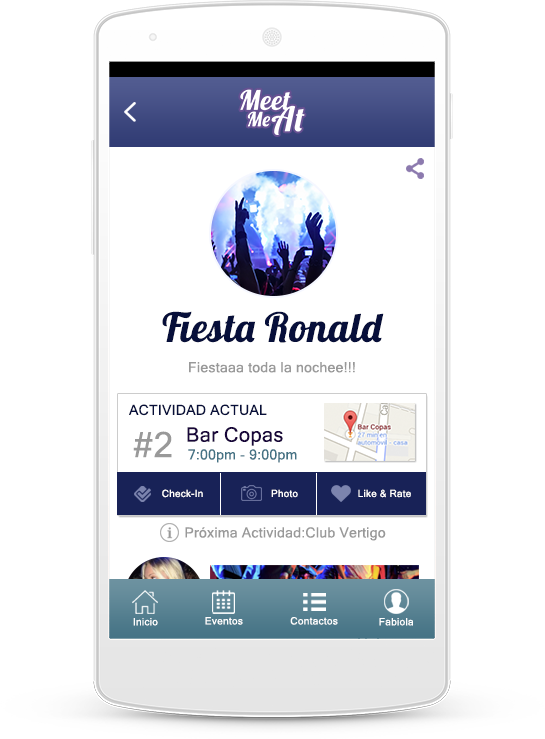
<style>
.page{position:relative;width:545px;height:739px;background:#ffffff}
.page>*{position:absolute;margin:0}
.t1{font:40px "Lobster";letter-spacing:0.02em;color:#070f3a}
.t2{font:14px "MicrosoftSansSerif";letter-spacing:0.02em;color:#999999}
.t3{font:14px "MicrosoftSansSerif";letter-spacing:0.02em;color:#070f3a}
.t4{font:35px "MicrosoftSansSerif";letter-spacing:0.02em;color:#999999}
.t5{font:20px "MicrosoftSansSerif";letter-spacing:0.02em;color:#18063a}
.t6{font:14px "MicrosoftSansSerif";letter-spacing:0.02em;color:#457385}
.t7{font:10px "MicrosoftSansSerif";letter-spacing:0.02em;color:#ffffff}
.t8{font:10.2px "MicrosoftSansSerif";letter-spacing:0.02em;color:#ffffff}
</style>
<div class="page">
<p class="t1" style="left:162px;top:311px;width:222px;height:32px">Fiesta Ronald</p>
<p class="t2" style="left:189px;top:362px;width:166px;height:11px">Fiestaaa toda la nochee!!!</p>
<p class="t3" style="left:129px;top:404px;width:138px;height:12px">ACTIVIDAD ACTUAL</p>
<p class="t4" style="left:133px;top:431px;width:39px;height:27px">#2</p>
<p class="t5" style="left:187px;top:427px;width:96px;height:19px">Bar Copas</p>
<p class="t6" style="left:188px;top:449px;width:109px;height:14px">7:00pm - 9:00pm</p>
<p class="t7" style="left:162px;top:489px;width:41px;height:9px">Check-In</p>
<p class="t7" style="left:271px;top:489px;width:27px;height:9px">Photo</p>
<p class="t7" style="left:358px;top:489px;width:53px;height:9px">Like &amp; Rate</p>
<p class="t2" style="left:185px;top:527px;width:201px;height:14px">Próxima Actividad:Club Vertigo</p>
<p class="t8" style="left:205px;top:617px;width:38px;height:8px">Eventos</p>
<p class="t8" style="left:290px;top:617px;width:48px;height:8px">Contactos</p>
<p class="t8" style="left:133px;top:618px;width:25px;height:8px">Inicio</p>
<p class="t8" style="left:379px;top:618px;width:34px;height:8px">Fabiola</p>
</div>
